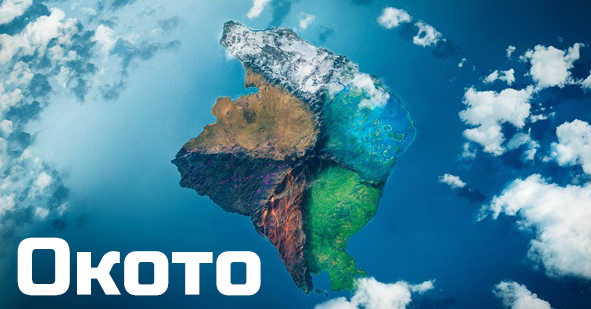
<style>
.page{position:relative;width:591px;height:309px}
.page>*{position:absolute;margin:0}
.t1{font:80px "RussoOne-Regular";color:#ffffff}
</style>
<div class="page">
<p class="t1" style="left:17px;top:237px;width:244px;height:59px">Окото</p>
</div>
